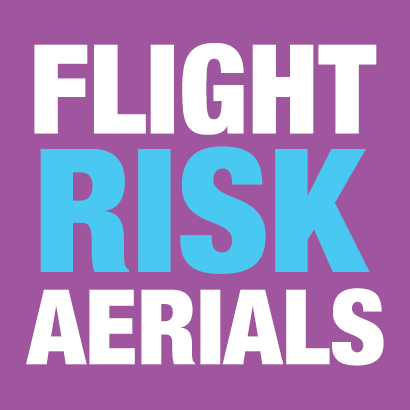
<style>
.page{position:relative;width:410px;height:410px;background:#a0569f}
.page>*{position:absolute;margin:0}
.t1{font:124px "HelveticaNeue-CondensedBlack";color:#ffffff}
.t2{font:172px "HelveticaNeue-CondensedBlack";color:#49c8f2}
.t3{font:104px "HelveticaNeue-CondensedBlack";color:#ffffff}
</style>
<div class="page">
<p class="t1" style="left:34px;top:43px;width:343px;height:92px">FLIGHT</p>
<p class="t2" style="left:40px;top:146px;width:330px;height:128px">RISK</p>
<p class="t3" style="left:26px;top:288px;width:358px;height:78px">AERIALS</p>
</div>
